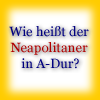
<style>
.page{position:relative;width:100px;height:100px}
.page>*{position:absolute;margin:0}
.t1{font:13.3px "Georgia";color:#000080}
.t2{font:13.3px "Georgia";color:#b10000}
</style>
<div class="page">
<p class="t1" style="left:9px;top:26px;width:80px;height:43px;text-align:center">Wie heißt der <br><span class="t2">Neapolitaner</span> <br>in A-Dur?</p>
</div>
